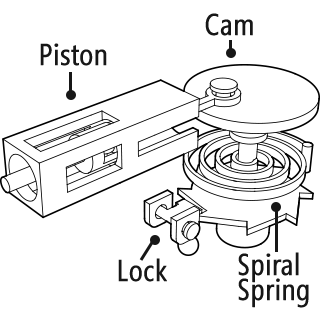
<style>
.page{position:relative;width:320px;height:320px;background:#ffffff}
.page>*{position:absolute;margin:0}
.t1{font:30px "SegoeCondensed";color:#171717;font-weight:bold}
.t2{font:30px/25px "SegoeCondensed";color:#171717;font-weight:bold}
</style>
<div class="page">
<p class="t1" style="left:205px;top:13px;width:48px;height:23px">Cam</p>
<p class="t1" style="left:40px;top:43px;width:67px;height:23px">Piston</p>
<p class="t2" style="left:238px;top:252px;width:71px;height:56px">Spiral <br>Spring</p>
<p class="t1" style="left:118px;top:258px;width:49px;height:24px">Lock</p>
</div>
